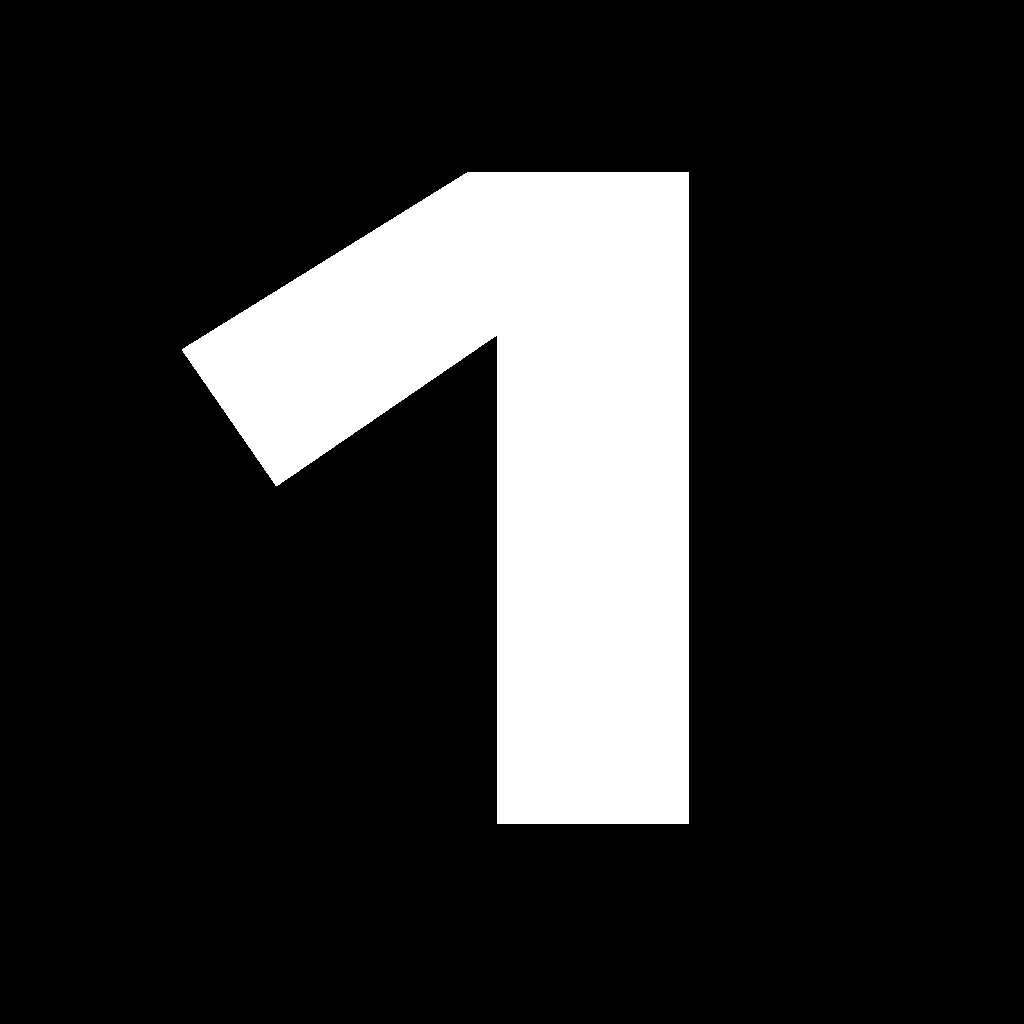
<style>
.page{position:relative;width:1024px;height:1024px;background:#000000}
.page>*{position:absolute;margin:0}
.t1{font:895.8px "Square721BT-BoldExtended";color:#ffffff}
</style>
<div class="page">
<p class="t1" style="left:182px;top:172px;width:507px;height:652px">1</p>
</div>
